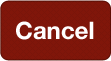
<style>
.page{position:relative;width:111px;height:61px;background:#80160a}
.page>*{position:absolute;margin:0}
.t1{font:24px "HelveticaNeue-Bold";color:#ffffff}
</style>
<div class="page">
<p class="t1" style="left:16px;top:21px;width:78px;height:19px">Cancel</p>
</div>
